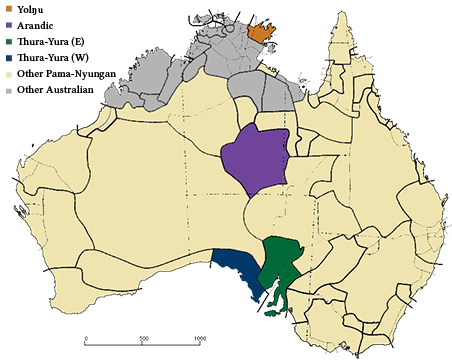
<style>
.page{position:relative;width:452px;height:362px;background:#ffffff}
.page>*{position:absolute;margin:0}
.t1{font:10.7px "LinLibertineOZ";color:#000000}
</style>
<div class="page">
<p class="t1" style="left:17px;top:5px;width:99px;height:89px">Yolŋu<br>Arandic<br>Thura-Yura (E)<br>Thura-Yura (W)<br>Other Pama-Nyungan<br>Other Australian</p>
</div>
